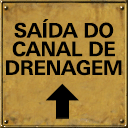
<style>
.page{position:relative;width:128px;height:128px}
.page>*{position:absolute;margin:0}
.t1{font:20px/18.7px "UniversNextPro-Bold";letter-spacing:-0.02em;color:#000000;text-transform:uppercase}
</style>
<div class="page">
<p class="t1" style="left:6px;top:19px;width:116px;height:57px;text-align:center">Saída do<br>canal de<br>drenagem</p>
</div>
